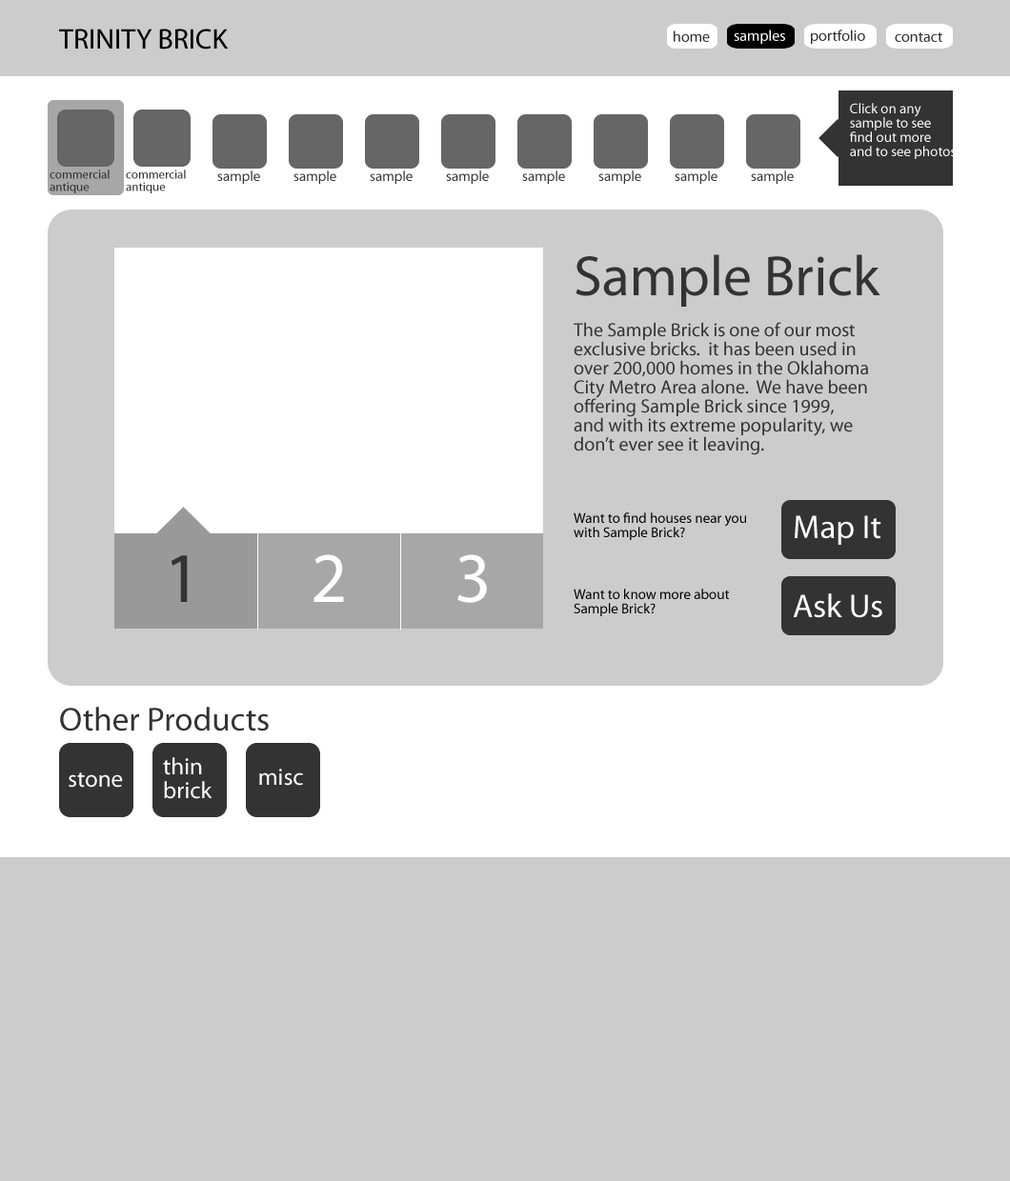
<style>
.page{position:relative;width:1010px;height:1181px;background:#cccccc}
.page>*{position:absolute;margin:0}
.t1{font:28.6px "MyriadPro-Regular";color:#000000}
.t2{font:15.2px "MyriadPro-Regular";color:#ffffff}
.t3{font:15.2px "MyriadPro-Regular";color:#333333}
.t4{font:14.3px/14.3px "MyriadPro-Regular";color:#ffffff}
.t5{font:12.4px/12.4px "MyriadPro-Regular";color:#333333}
.t6{font:14.3px "MyriadPro-Regular";color:#333333}
.t7{font:57.1px "MyriadPro-Regular";color:#333333}
.t8{font:19px/19px "MyriadPro-Regular";color:#333333}
.t9{font:14.3px/14.3px "MyriadPro-Regular";color:#000000}
.t10{font:33.3px "MyriadPro-Regular";color:#ffffff}
.t11{font:71.4px "MyriadPro-Regular";color:#333333}
.t12{font:71.4px "MyriadPro-Regular";color:#ffffff}
.t13{font:33.3px "MyriadPro-Regular";color:#333333}
.t14{font:23.8px/23.8px "MyriadPro-Regular";color:#ffffff}
.t15{font:23.8px "MyriadPro-Regular";color:#ffffff}
</style>
<div class="page">
<p class="t1" style="left:59px;top:29px;width:170px;height:21px">TRINITY BRICK</p>
<p class="t2" style="left:733px;top:30px;width:52px;height:14px">samples</p>
<p class="t3" style="left:811px;top:30px;width:54px;height:14px">portfolio</p>
<p class="t3" style="left:673px;top:30px;width:37px;height:12px">home</p>
<p class="t3" style="left:894px;top:32px;width:48px;height:10px">contact</p>
<p class="t4" style="left:850px;top:103px;width:105px;height:56px">Click on any <br>sample to see <br>find out more <br>and to see photos</p>
<p class="t5" style="left:50px;top:170px;width:60px;height:23px">commercial <br>antique</p>
<p class="t5" style="left:126px;top:170px;width:60px;height:23px">commercial <br>antique</p>
<p class="t6" style="left:217px;top:170px;width:43px;height:14px">sample</p>
<p class="t6" style="left:293px;top:170px;width:43px;height:14px">sample</p>
<p class="t6" style="left:370px;top:170px;width:42px;height:14px">sample</p>
<p class="t6" style="left:446px;top:170px;width:43px;height:14px">sample</p>
<p class="t6" style="left:522px;top:170px;width:43px;height:14px">sample</p>
<p class="t6" style="left:598px;top:170px;width:43px;height:14px">sample</p>
<p class="t6" style="left:674px;top:170px;width:43px;height:14px">sample</p>
<p class="t6" style="left:751px;top:170px;width:42px;height:14px">sample</p>
<p class="t7" style="left:575px;top:254px;width:305px;height:53px">Sample Brick</p>
<p class="t8" style="left:573px;top:322px;width:295px;height:133px">The Sample Brick is one of our most <br>exclusive bricks.  it has been used in <br>over 200,000 homes in the Oklahoma <br>City Metro Area alone.  We have been <br>offering Sample Brick since 1999, <br>and with its extreme popularity, we <br>don’t ever see it leaving.</p>
<p class="t9" style="left:573px;top:512px;width:173px;height:28px">Want to find houses near you <br>with Sample Brick?</p>
<p class="t10" style="left:794px;top:515px;width:87px;height:30px">Map It</p>
<p class="t11" style="left:171px;top:555px;width:17px;height:47px">1</p>
<p class="t12" style="left:313px;top:554px;width:31px;height:48px">2</p>
<p class="t12" style="left:457px;top:554px;width:30px;height:49px">3</p>
<p class="t9" style="left:573px;top:589px;width:156px;height:27px">Want to know more about <br>Sample Brick?</p>
<p class="t10" style="left:792px;top:593px;width:90px;height:25px">Ask Us</p>
<p class="t13" style="left:60px;top:707px;width:209px;height:25px">Other Products</p>
<p class="t14" style="left:163px;top:757px;width:49px;height:42px">thin<br>brick</p>
<p class="t15" style="left:69px;top:772px;width:54px;height:16px">stone</p>
<p class="t15" style="left:259px;top:769px;width:44px;height:17px">misc</p>
</div>
